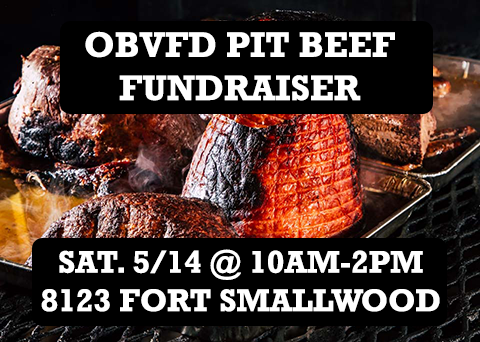
<style>
.page{position:relative;width:480px;height:342px;background:#000000}
.page>*{position:absolute;margin:0}
.t1{font:36px "Rockwell-Bold";color:#ffffff}
.t2{font:32px "Rockwell-Bold";color:#ffffff}
</style>
<div class="page">
<p class="t1" style="left:85px;top:31px;width:310px;height:70px;text-align:center">OBVFD PIT BEEF <br>FUNDRAISER</p>
<p class="t2" style="left:41px;top:249px;width:399px;height:63px;text-align:center">SAT. 5/14 @ 10AM-2PM<br>8123 FORT SMALLWOOD</p>
</div>
